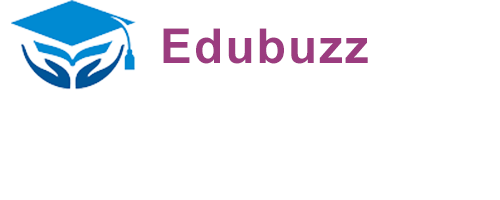
<style>
.page{position:relative;width:500px;height:200px;background:#ffffff}
.page>*{position:absolute;margin:0}
.t1{font:48px "Arial-BoldMT";letter-spacing:0.04em;color:#9b3c7f}
</style>
<div class="page">
<p class="t1" style="left:163px;top:28px;width:205px;height:36px">Edubuzz</p>
</div>
